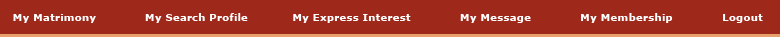
<style>
.page{position:relative;width:780px;height:37px;background:#9e281a}
.page>*{position:absolute;margin:0}
.t1{font:10.5px "Verdana-Bold";color:#ffffff}
</style>
<div class="page">
<p class="t1" style="left:13px;top:14px;width:83px;height:9px">My Matrimony</p>
<p class="t1" style="left:145px;top:13px;width:103px;height:10px">My Search Profile</p>
<p class="t1" style="left:293px;top:14px;width:118px;height:9px">My Express Interest</p>
<p class="t1" style="left:460px;top:14px;width:71px;height:9px">My Message</p>
<p class="t1" style="left:581px;top:13px;width:92px;height:10px">My Membership</p>
<p class="t1" style="left:723px;top:14px;width:40px;height:9px">Logout</p>
</div>
